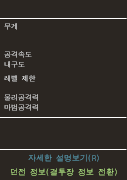
<style>
.page{position:relative;width:127px;height:180px;background:#2b2622}
.page>*{position:absolute;margin:0}
.t1{font:7px "DotumChe"}
.t2{font:8px "DotumChe"}
</style>
<div class="page">
<p class="t1" style="left:4px;top:23px;width:13px;height:7px">무게</p>
<p class="t1" style="left:4px;top:51px;width:28px;height:7px">공격속도</p>
<p class="t1" style="left:4px;top:61px;width:21px;height:7px">내구도</p>
<p class="t1" style="left:4px;top:75px;width:32px;height:7px">레벨 제한</p>
<p class="t1" style="left:4px;top:94px;width:34px;height:7px">물리공격력</p>
<p class="t1" style="left:4px;top:104px;width:34px;height:7px">마법공격력</p>
<p class="t2" style="left:28px;top:154px;width:71px;height:8px">자세한 설명보기(R)</p>
<p class="t2" style="left:11px;top:168px;width:106px;height:8px">던전 정보(결투장 정보 전환)</p>
</div>
